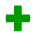
<style>
.page{position:relative;width:36px;height:36px;background:#ffffff}
.page>*{position:absolute;margin:0}
.t1{font:54.2px "AllerDisplay";color:#009900}
</style>
<div class="page">
<p class="t1" style="left:5px;top:5px;width:26px;height:27px">+</p>
</div>
